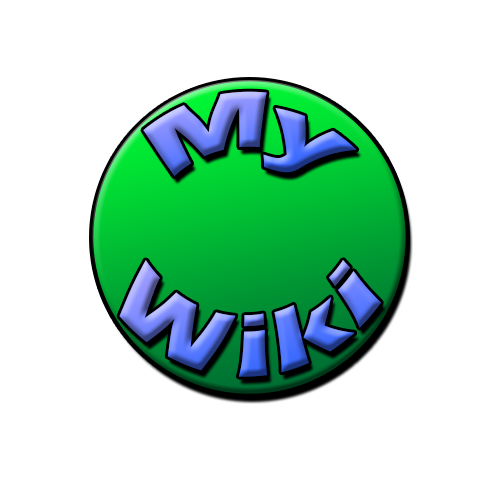
<style>
.page{position:relative;width:500px;height:500px;background:#ffffff}
.page>*{position:absolute;margin:0}
.t1{font:83.3px "ErasITC-Bold"}
.t2{font:91.5px "ErasITC-Bold";scale:0.85 1}
</style>
<div class="page">
<p class="t1" style="left:143px;top:91px;width:214px;height:86px">My</p>
<p class="t2" style="left:119px;top:260px;width:262px;height:117px">Wiki</p>
</div>
